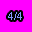
<style>
.page{position:relative;width:32px;height:32px;background:#ff00ff}
.page>*{position:absolute;margin:0}
.t1{font:11px "ArialMT";color:#8694ff}
</style>
<div class="page">
<p class="t1" style="left:8px;top:12px;width:14px;height:8px">4/4</p>
</div>
